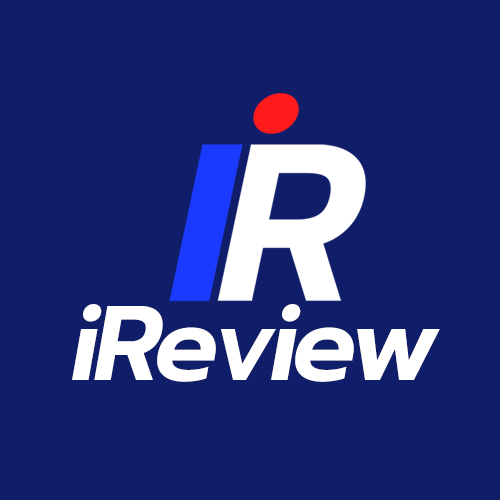
<style>
.page{position:relative;width:500px;height:500px;background:#101d69}
.page>*{position:absolute;margin:0}
.t1{font:105.8px "Prompt-SemiBold";letter-spacing:-0.06em;color:#ffffff;font-style:italic}
</style>
<div class="page">
<p class="t1" style="left:72px;top:304px;width:368px;height:78px">iReview</p>
</div>
